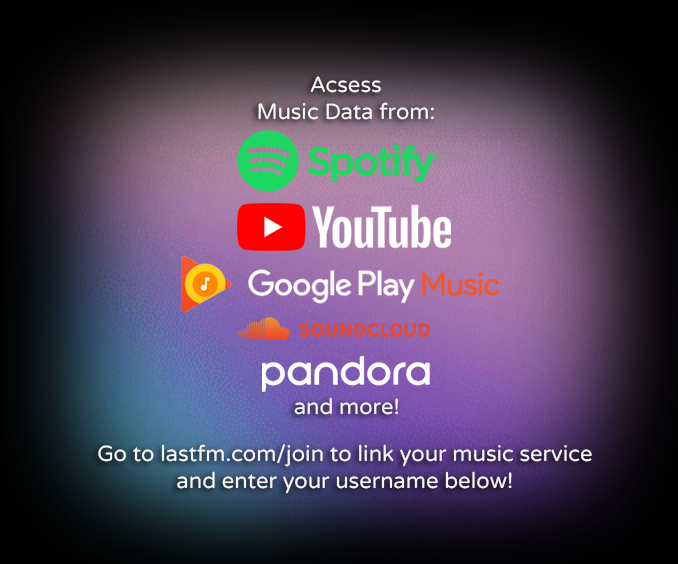
<style>
.page{position:relative;width:678px;height:564px}
.page>*{position:absolute;margin:0}
.t1{font:22px "VarelaRound-Regular";color:#f6f6f6}
</style>
<div class="page">
<p class="t1" style="left:258px;top:76px;width:176px;height:44px;text-align:center">Acsess<br>Music Data from:</p>
<p class="t1" style="left:294px;top:397px;width:104px;height:18px">and more!</p>
<p class="t1" style="left:98px;top:444px;width:494px;height:50px;text-align:center">Go to lastfm.com/join to link your music service<br>and enter your username below!</p>
</div>
